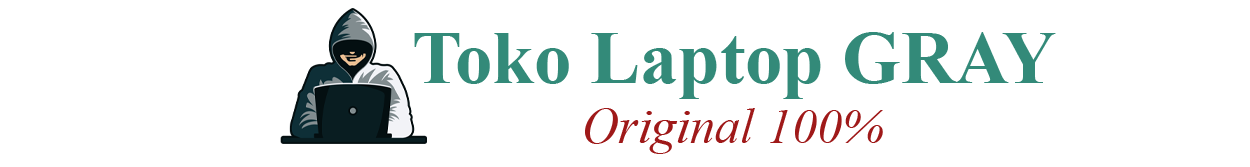
<style>
.page{position:relative;width:1250px;height:167px;background:#ffffff}
.page>*{position:absolute;margin:0}
.t1{font:75px "TimesNewRomanPS-BoldMT";color:#338a79}
.t2{font:50px "TimesNewRomanPS-ItalicMT";color:#9f1919}
</style>
<div class="page">
<p class="t1" style="left:414px;top:32px;width:642px;height:122px;text-align:center">Toko Laptop GRAY<br><span class="t2">Original 100%</span></p>
</div>
